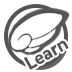
<style>
.page{position:relative;width:72px;height:72px;background:#ffffff}
.page>*{position:absolute;margin:0}
.t1{font:18.8px "MikadoMedium";color:#535453}
</style>
<div class="page">
<p class="t1" style="left:24px;top:40px;width:45px;height:30px;rotate:-30deg">Learn</p>
</div>
